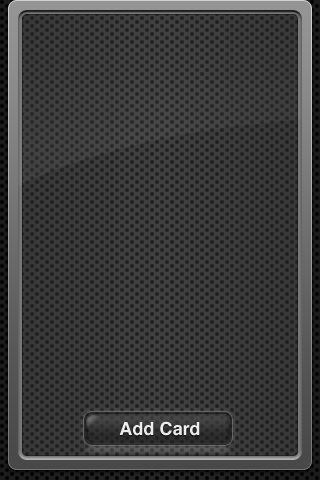
<style>
.page{position:relative;width:320px;height:480px}
.page>*{position:absolute;margin:0}
.t1{font:18px "Helvetica-Bold";color:#ededed}
</style>
<div class="page">
<p class="t1" style="left:119px;top:421px;width:81px;height:15px">Add Card</p>
</div>
